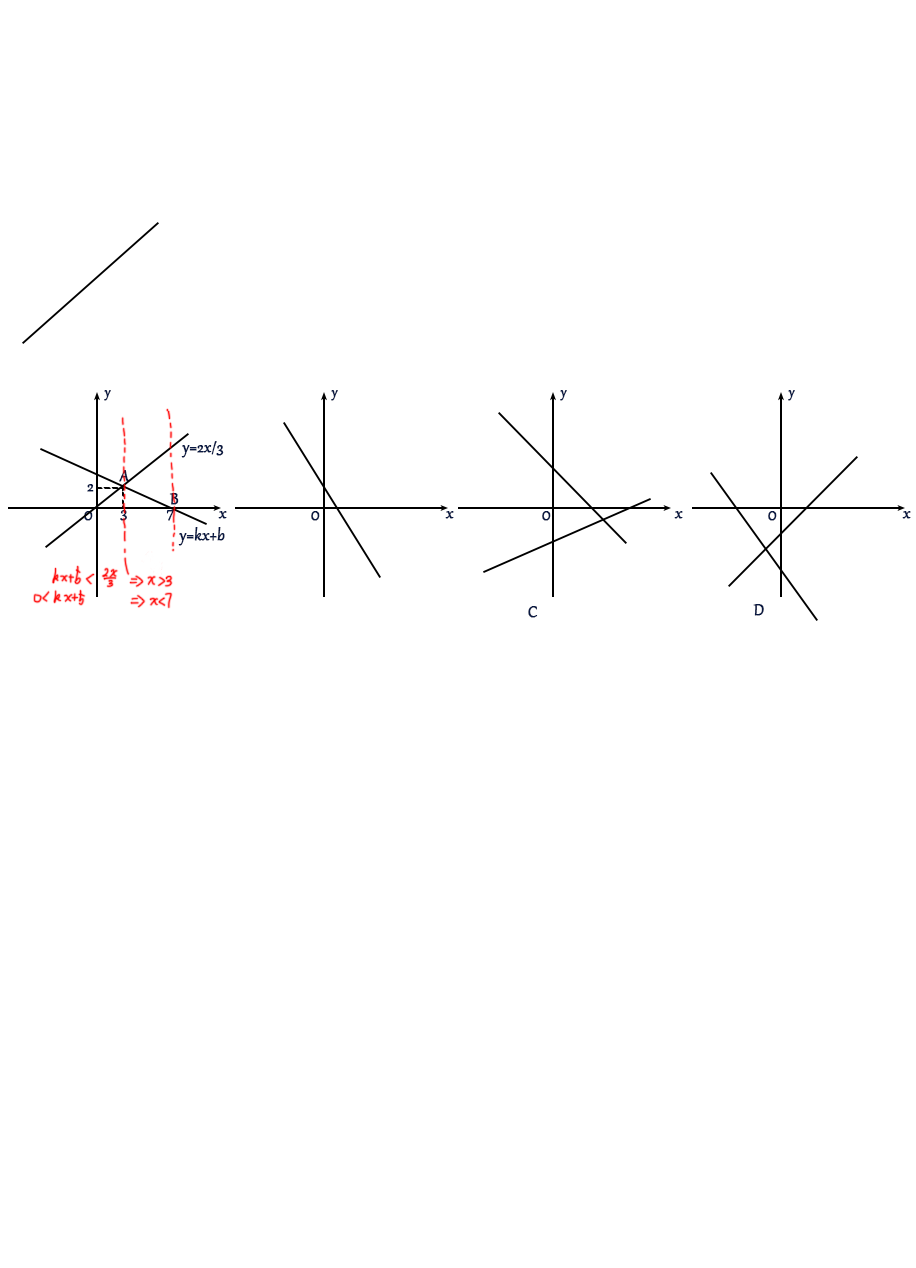
<style>
.page{position:relative;width:916px;height:1268px;background:#ffffff}
.page>*{position:absolute;margin:0}
.t1{font:16px "Gabriola";color:#081842;font-weight:bold}
.t2{font:18.7px "Gabriola";color:#081842;font-weight:bold}
.t3{font:18.7px "Gabriola";font-weight:bold}
</style>
<div class="page">
<p class="t1" style="left:104px;top:390px;width:7px;height:11px">y</p>
<p class="t1" style="left:331px;top:390px;width:7px;height:11px">y</p>
<p class="t1" style="left:560px;top:390px;width:7px;height:11px">y</p>
<p class="t1" style="left:788px;top:390px;width:7px;height:11px">y</p>
<p class="t2" style="left:181px;top:441px;width:43px;height:17px">y=2x/3</p>
<p class="t3" style="left:119px;top:470px;width:11px;height:12px">A</p>
<p class="t2" style="left:87px;top:484px;width:7px;height:8px">2</p>
<p class="t3" style="left:169px;top:493px;width:10px;height:12px">B</p>
<p class="t3" style="left:120px;top:510px;width:7px;height:11px">3</p>
<p class="t2" style="left:166px;top:510px;width:9px;height:11px">7</p>
<p class="t1" style="left:84px;top:511px;width:9px;height:10px">O</p>
<p class="t2" style="left:218px;top:511px;width:9px;height:8px">x</p>
<p class="t1" style="left:311px;top:511px;width:9px;height:10px">O</p>
<p class="t2" style="left:445px;top:511px;width:9px;height:8px">x</p>
<p class="t1" style="left:542px;top:511px;width:9px;height:10px">O</p>
<p class="t2" style="left:674px;top:511px;width:9px;height:8px">x</p>
<p class="t1" style="left:768px;top:511px;width:9px;height:10px">O</p>
<p class="t2" style="left:902px;top:511px;width:9px;height:8px">x</p>
<p class="t2" style="left:178px;top:527px;width:47px;height:19px">y=kx+b</p>
<p class="t2" style="left:528px;top:606px;width:10px;height:12px">C</p>
<p class="t2" style="left:753px;top:604px;width:11px;height:12px">D</p>
</div>
